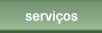
<style>
.page{position:relative;width:102px;height:33px}
.page>*{position:absolute;margin:0}
.t1{font:13.1px "ArialMT";letter-spacing:0.02em;color:#ffffff;font-weight:bold}
</style>
<div class="page">
<p class="t1" style="left:25px;top:11px;width:53px;height:13px">serviços</p>
</div>
